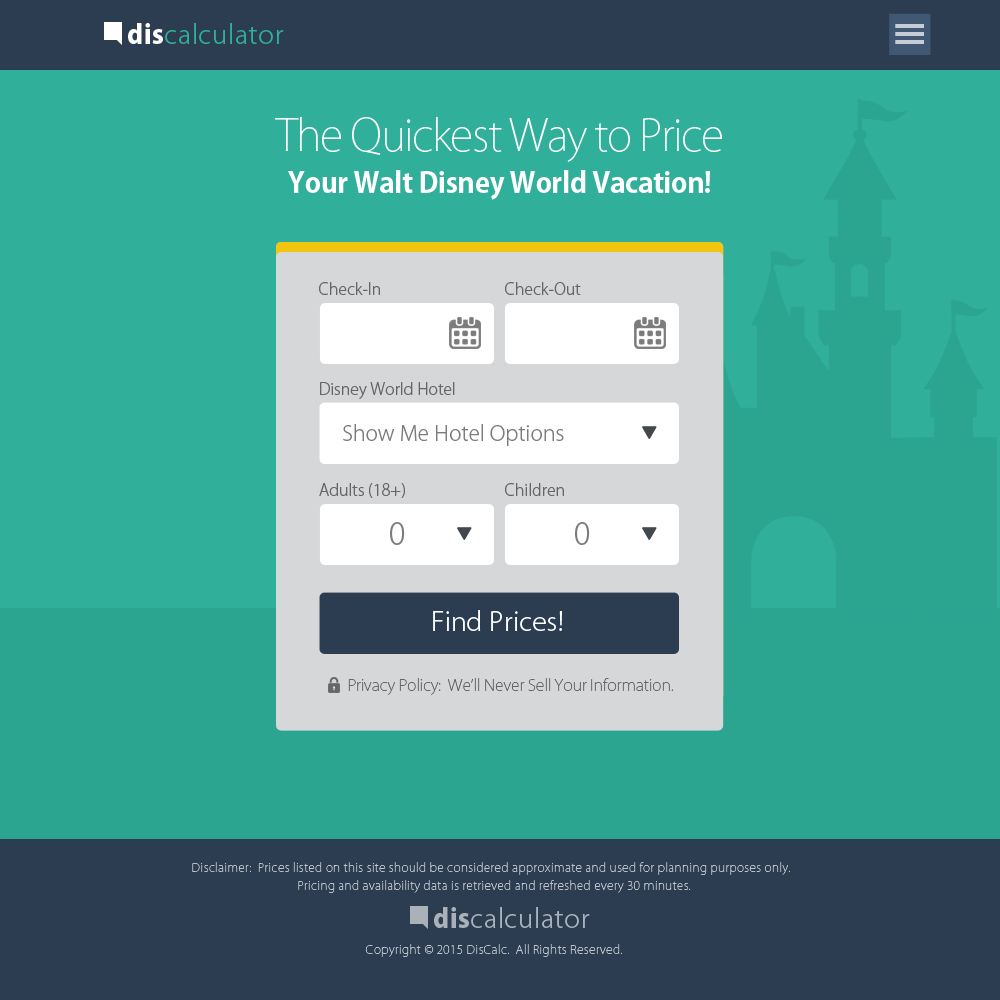
<style>
.page{position:relative;width:1000px;height:1000px;background:#30af9a}
.page>*{position:absolute;margin:0}
.t1{font:26px "KozGoPro-Light";letter-spacing:0.025em;color:#30af9a}
.t2{font:26px "KozGoPro-Heavy";letter-spacing:0.025em;color:#ffffff}
.t3{font:28px/42px "KozGoPro-Bold";letter-spacing:-0.01em;color:#ffffff}
.t4{font:43px/6.5px "KozGoPro-ExtraLight";letter-spacing:-0.035em;color:#ffffff}
.t5{font:16px "KozGoPro-Light";color:#666666}
.t6{font:21px "KozGoPro-Light";color:#7c7c7c}
.t7{font:30px "KozGoPro-Light";color:#7c7c7c;font-variant:small-caps}
.t8{font:26px "KozGoPro-Light";letter-spacing:0.01em;color:#ffffff}
.t9{font:16px "KozGoPro-ExtraLight";letter-spacing:-0.01em;color:#666666}
.t10{font:12px/18px "KozGoPro-ExtraLight";letter-spacing:0.025em;color:#c0c5cb}
.t11{font:12px/64px "KozGoPro-ExtraLight";letter-spacing:0.025em;color:#c0c5cb}
.t12{font:26px "KozGoPro-Light";letter-spacing:0.025em;color:#abb1b9}
.t13{font:26px "KozGoPro-Heavy";letter-spacing:0.025em;color:#abb1b9}
</style>
<div class="page">
<p class="t1" style="left:128px;top:23px;width:156px;height:21px"><span class="t2">dis</span>calculator</p>
<p class="t3" style="left:275px;top:117px;width:447px;height:83px;text-align:center"><span class="t4">The Quickest Way to Price<br></span>Your Walt Disney World Vacation!</p>
<p class="t5" style="left:319px;top:282px;width:61px;height:13px">Check-In</p>
<p class="t5" style="left:505px;top:282px;width:76px;height:13px">Check-Out</p>
<p class="t5" style="left:320px;top:382px;width:135px;height:17px">Disney World Hotel</p>
<p class="t6" style="left:343px;top:424px;width:221px;height:22px">Show Me Hotel Options</p>
<p class="t5" style="left:319px;top:483px;width:86px;height:15px">Adults (18+)</p>
<p class="t5" style="left:505px;top:483px;width:59px;height:13px">Children</p>
<p class="t7" style="left:390px;top:522px;width:15px;height:23px">0</p>
<p class="t7" style="left:575px;top:522px;width:15px;height:23px">0</p>
<p class="t8" style="left:433px;top:610px;width:129px;height:21px">Find Prices!</p>
<p class="t9" style="left:348px;top:678px;width:326px;height:17px">Privacy Policy:  We’ll Never Sell Your Information.</p>
<p class="t10" style="left:192px;top:862px;width:598px;height:95px;text-align:center">Disclaimer:  Prices listed on this site should be considered approximate and used for planning purposes only.  <br>Pricing and availability data is retrieved and refreshed every 30 minutes.<br><span class="t11">Copyright © 2015 DisCalc.  All Rights Reserved.</span></p>
<p class="t12" style="left:434px;top:907px;width:156px;height:21px"><span class="t13">dis</span>calculator</p>
</div>
